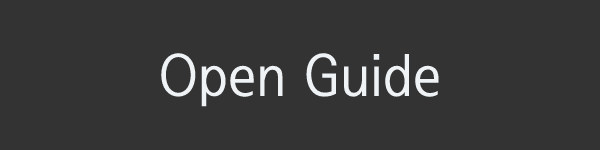
<style>
.page{position:relative;width:600px;height:150px;background:#333333}
.page>*{position:absolute;margin:0}
.t1{font:60px "SeN-CM";color:#eff3f6}
</style>
<div class="page">
<p class="t1" style="left:161px;top:53px;width:278px;height:54px">Open Guide</p>
</div>
